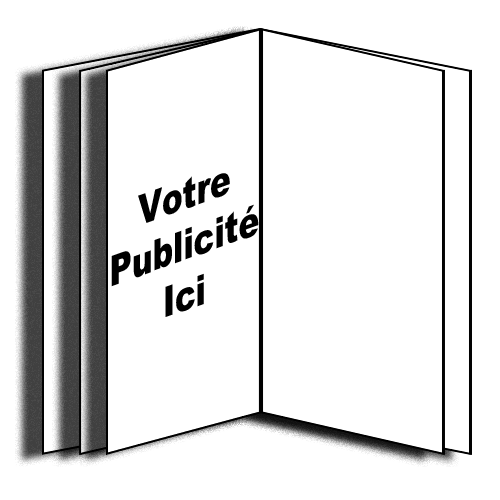
<style>
.page{position:relative;width:500px;height:500px;background:#ffffff}
.page>*{position:absolute;margin:0}
.t1{font:42.3px "Arial-Black";color:#000000;scale:0.78 1}
</style>
<div class="page">
<p class="t1" style="left:111px;top:173px;width:148px;height:144px;text-align:center;rotate:-20deg">Votre<br>Publicité<br>Ici</p>
</div>
